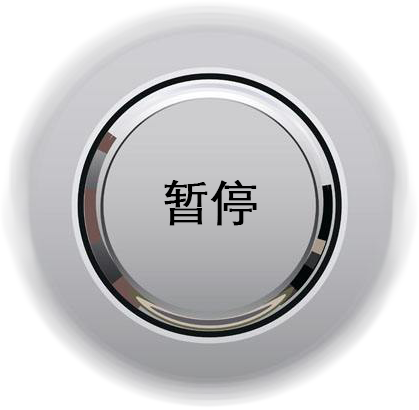
<style>
.page{position:relative;width:419px;height:410px;background:#ffffff}
.page>*{position:absolute;margin:0}
.t1{font:48px "STXihei";color:#000000;font-weight:bold}
</style>
<div class="page">
<p class="t1" style="left:164px;top:180px;width:93px;height:46px">暂停</p>
</div>
